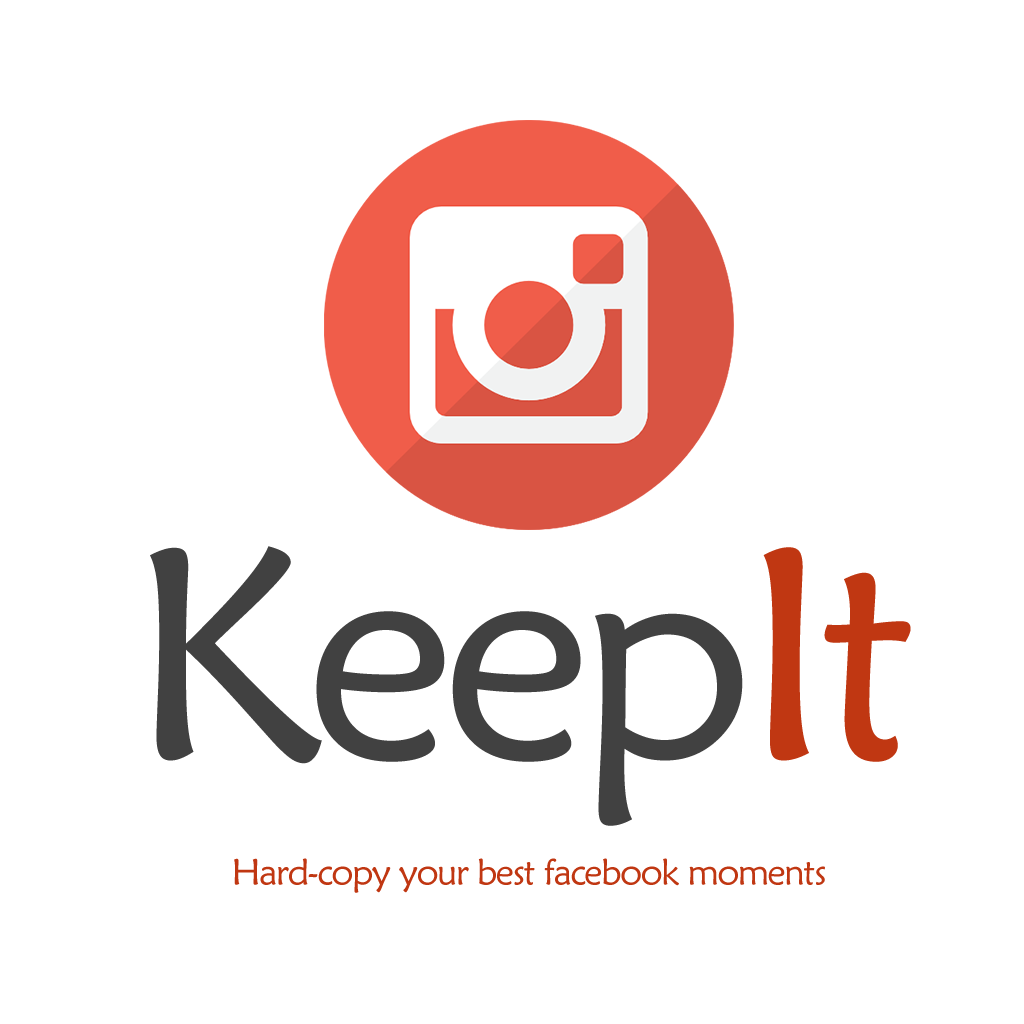
<style>
.page{position:relative;width:1024px;height:1024px;background:#ffffff}
.page>*{position:absolute;margin:0}
.t1{font:302px "MaiandraGD-Regular";letter-spacing:-0.04em;color:#414141}
.t2{font:302px "MaiandraGD-Regular";letter-spacing:-0.04em;color:#c03712}
.t3{font:36.7px "MaiandraGD-Regular";letter-spacing:-0.04em;color:#c03712}
</style>
<div class="page">
<p class="t1" style="left:150px;top:546px;width:761px;height:280px">Keep<span class="t2">It</span></p>
<p class="t3" style="left:234px;top:858px;width:591px;height:35px">Hard-copy your best facebook moments</p>
</div>
